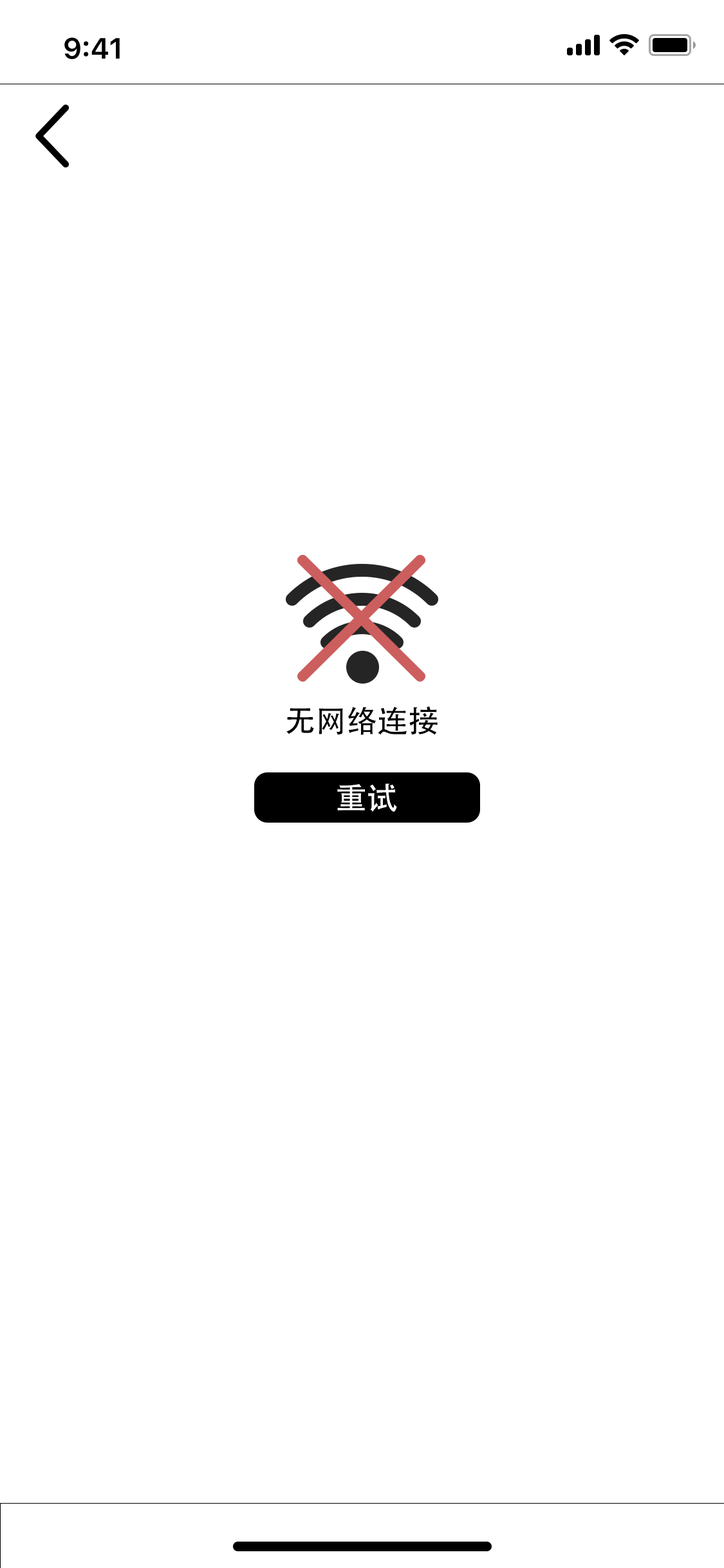
<style>
.page{position:relative;width:724px;height:1568px;background:#ffffff}
.page>*{position:absolute;margin:0}
.t1{font:30.9px "AdobeHeitiStd-Regular";color:#000000}
.t2{font:30.9px "AdobeHeitiStd-Regular";color:#ffffff}
</style>
<div class="page">
<p class="t1" style="left:286px;top:706px;width:152px;height:29px">无网络连接</p>
<p class="t2" style="left:337px;top:783px;width:60px;height:29px">重试</p>
</div>
